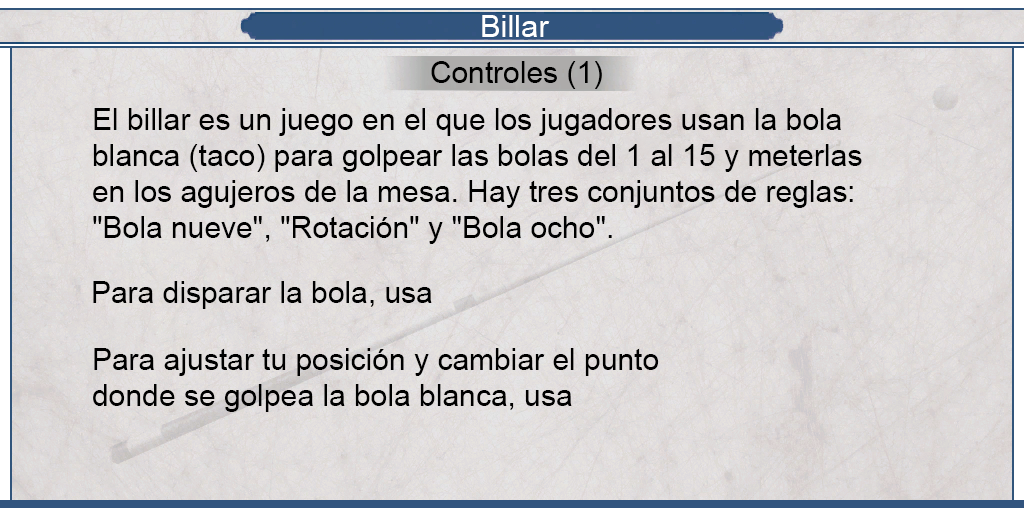
<style>
.page{position:relative;width:1024px;height:512px}
.page>*{position:absolute;margin:0}
.t1{font:30.8px "ArialMT";color:#ffffff}
.t2{font:30px "ArialMT";color:#000000}
.t3{font:29.9px "ArialMT";color:#000000}
.t4{font:29.6px "ArialMT";color:#000000}
</style>
<div class="page">
<p class="t1" style="left:482px;top:15px;width:68px;height:22px">Billar</p>
<p class="t2" style="left:431px;top:61px;width:171px;height:28px">Controles (1)</p>
<p class="t2" style="left:93px;top:108px;width:769px;height:136px;text-align:justify">El billar es un juego en el que los jugadores usan la bola<br>blanca (taco) para golpear las bolas del 1 al 15 y meterlas<br>en los agujeros de la mesa. Hay tres conjuntos de reglas:<br>"Bola nueve", "Rotación" y "Bola ocho".</p>
<p class="t3" style="left:93px;top:281px;width:339px;height:28px">Para disparar la bola, usa</p>
<p class="t4" style="left:93px;top:348px;width:566px;height:64px;text-align:justify">Para ajustar tu posición y cambiar el punto<br>donde se golpea la bola blanca, usa</p>
</div>
